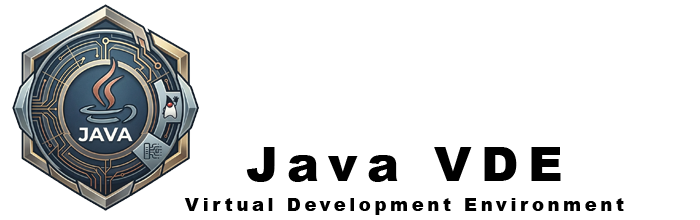
<style>
.page{position:relative;width:700px;height:220px;background:#ffffff}
.page>*{position:absolute;margin:0}
.t1{font:18px/30px "Arial-Black";letter-spacing:0.2em;color:#000000}
.t2{font:48px/30px "Arial-Black";letter-spacing:0.2em;color:#000000}
</style>
<div class="page">
<p class="t1" style="left:184px;top:147px;width:440px;height:68px;text-align:center"><span class="t2">Java VDE<br></span>Virtual Development Environment</p>
</div>
